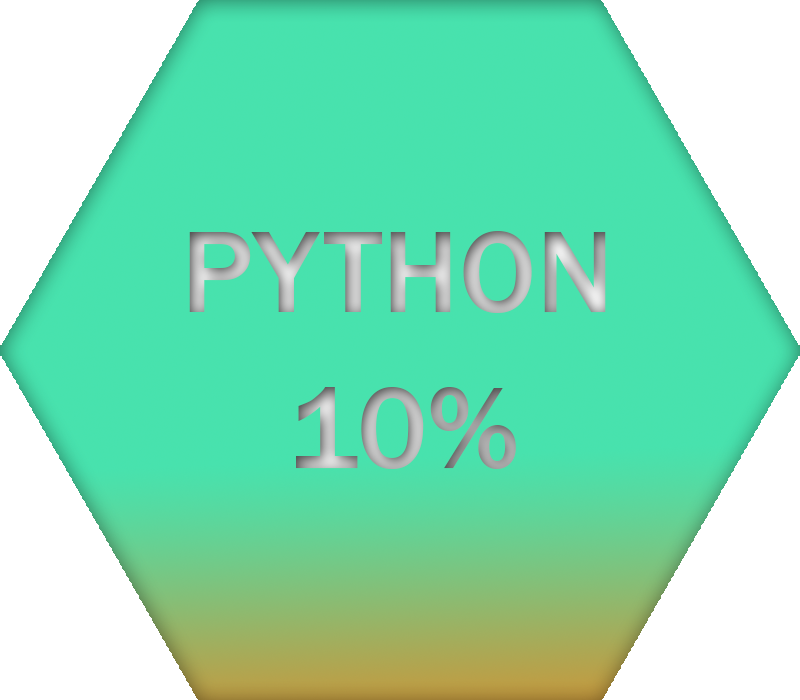
<style>
.page{position:relative;width:800px;height:700px;background:#ffffff}
.page>*{position:absolute;margin:0}
.t1{font:120px "FranklinGothic-Medium"}
</style>
<div class="page">
<p class="t1" style="left:189px;top:231px;width:417px;height:82px">PYTHON</p>
<p class="t1" style="left:296px;top:387px;width:220px;height:82px">10%</p>
</div>
